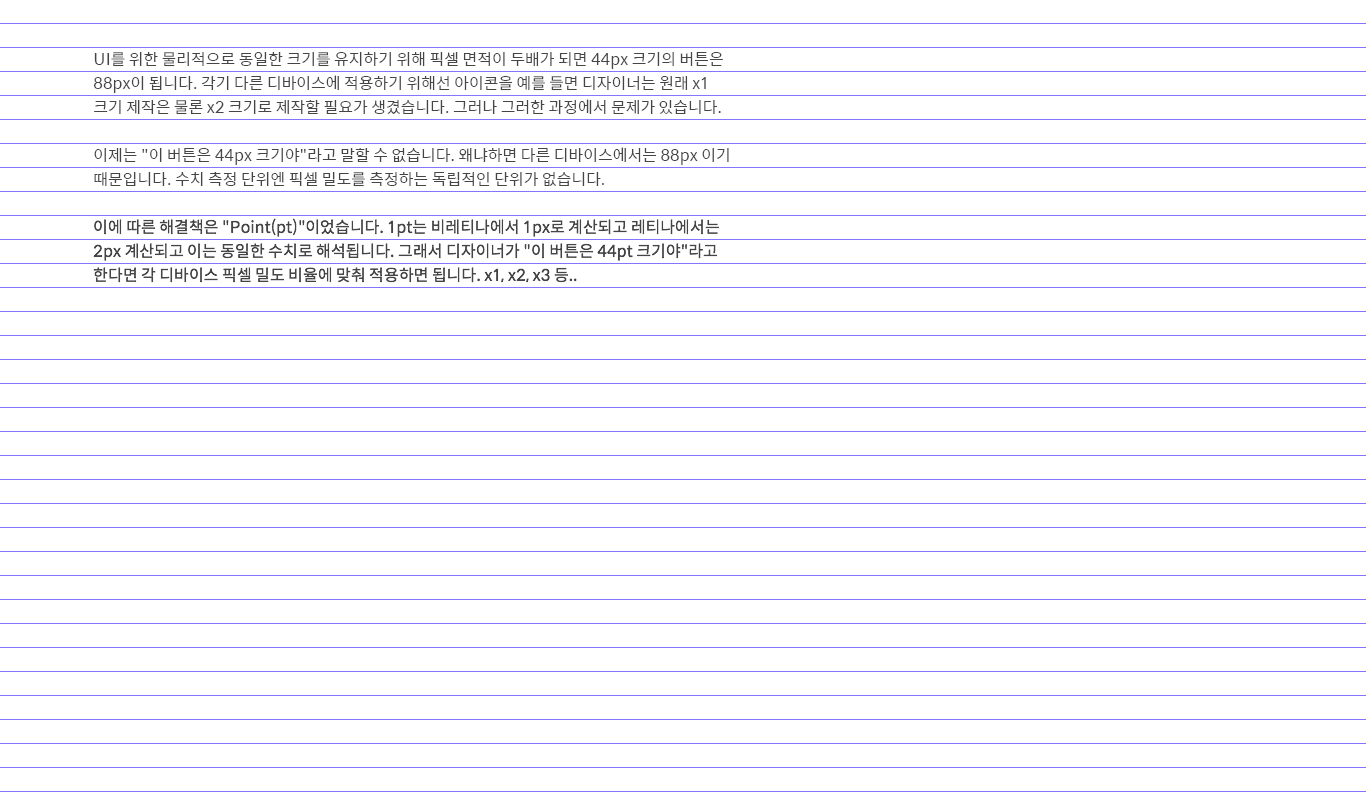
<style>
.page{position:relative;width:1366px;height:800px;background:#ffffff}
.page>*{position:absolute;margin:0}
.t1{font:16px "SpoqaHanSans-Regular";color:#454545}
</style>
<div class="page">
<p class="t1" style="left:93px;top:52px;width:636px;height:231px">UI를 위한 물리적으로 동일한 크기를 유지하기 위해 픽셀 면적이 두배가 되면 44px 크기의 버튼은 88px이 됩니다. 각기 다른 디바이스에 적용하기 위해선 아이콘을 예를 들면 디자이너는 원래 x1 크기 제작은 물론 x2 크기로 제작할 필요가 생겼습니다. 그러나 그러한 과정에서 문제가 있습니다.<br>이제는 "이 버튼은 44px 크기야"라고 말할 수 없습니다. 왜냐하면 다른 디바이스에서는 88px 이기 때문입니다. 수치 측정 단위엔 픽셀 밀도를 측정하는 독립적인 단위가 없습니다.<br>이에 따른 해결책은 "Point(pt)"이었습니다. 1pt는 비레티나에서 1px로 계산되고 레티나에서는 2px 계산되고 이는 동일한 수치로 해석됩니다. 그래서 디자이너가 "이 버튼은 44pt 크기야"라고 한다면 각 디바이스 픽셀 밀도 비율에 맞춰 적용하면 됩니다. x1, x2, x3 등..</p>
</div>
